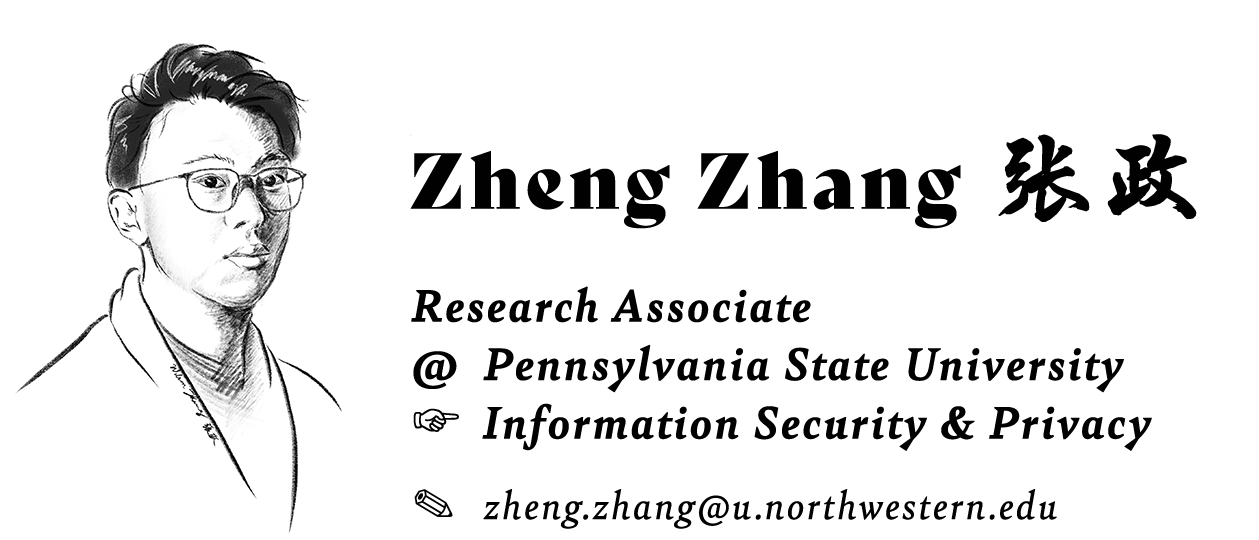
<style>
.page{position:relative;width:1259px;height:540px;background:#ffffff}
.page>*{position:absolute;margin:0}
.t1{font:76.5px "BelyDisplay-Regular";letter-spacing:0.04em;color:#010101;font-weight:bold}
.t2{font:100.4px "HYChengXingJ";letter-spacing:0.04em;color:#010101;font-weight:bold}
.t3{font:48.1px/58.3px "Bely-BoldItalic";letter-spacing:0.04em;color:#010101;font-weight:bold}
.t4{font:48.1px/58.3px "HiraKakuPro-W3";letter-spacing:0.04em;color:#010101;font-weight:bold}
.t5{font:41.3px "Bely-Italic";letter-spacing:0.04em;color:#010101;font-weight:bold}
.t6{font:45.4px "ZapfDingbatsITC";letter-spacing:0.04em;color:#010101;font-weight:bold}
</style>
<div class="page">
<p class="t1" style="left:410px;top:134px;width:787px;height:95px">Zheng Zhang <span class="t2">张政</span></p>
<p class="t3" style="left:411px;top:286px;width:741px;height:165px">Research Associate <br>@  Pennsylvania State University<br><span class="t4">☞ </span>Information Security &amp; Privacy</p>
<p class="t5" style="left:414px;top:489px;width:643px;height:40px"><span class="t6">✎  </span>zheng.zhang@u.northwestern.edu</p>
</div>
